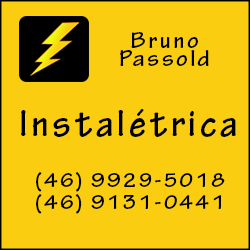
<style>
.page{position:relative;width:250px;height:250px;background:#fbcd11}
.page>*{position:absolute;margin:0}
.t1{font:24px/18px "TektonPro-Bold";letter-spacing:0.1em;color:#000000}
.t2{font:39.8px "TektonPro-Bold";letter-spacing:0.1em;color:#000000;scale:0.93 1}
.t3{font:21.2px/21.2px "TektonPro-Bold";letter-spacing:0.1em;color:#000000}
</style>
<div class="page">
<p class="t1" style="left:120px;top:32px;width:89px;height:34px;text-align:center">Bruno <br>Passold</p>
<p class="t2" style="left:21px;top:109px;width:215px;height:28px">Instalétrica</p>
<p class="t3" style="left:36px;top:172px;width:189px;height:42px">(46) 9929-5018<br>(46) 9131-0441</p>
</div>
